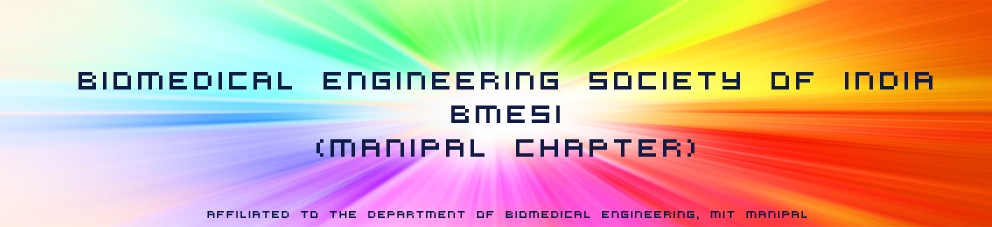
<style>
.page{position:relative;width:992px;height:227px}
.page>*{position:absolute;margin:0}
.t1{font:28px "VirtualDJ";color:#0f1b44}
.t2{font:11px "VirtualDJ";color:#0f1b44}
</style>
<div class="page">
<p class="t1" style="left:78px;top:72px;width:855px;height:85px;text-align:center">biomedical engineering society of india <br>bmesi<br>(manipal chapter)</p>
<p class="t2" style="left:207px;top:211px;width:600px;height:9px">affiliated to the Department of Biomedical Engineering, MIT Manipal</p>
</div>
